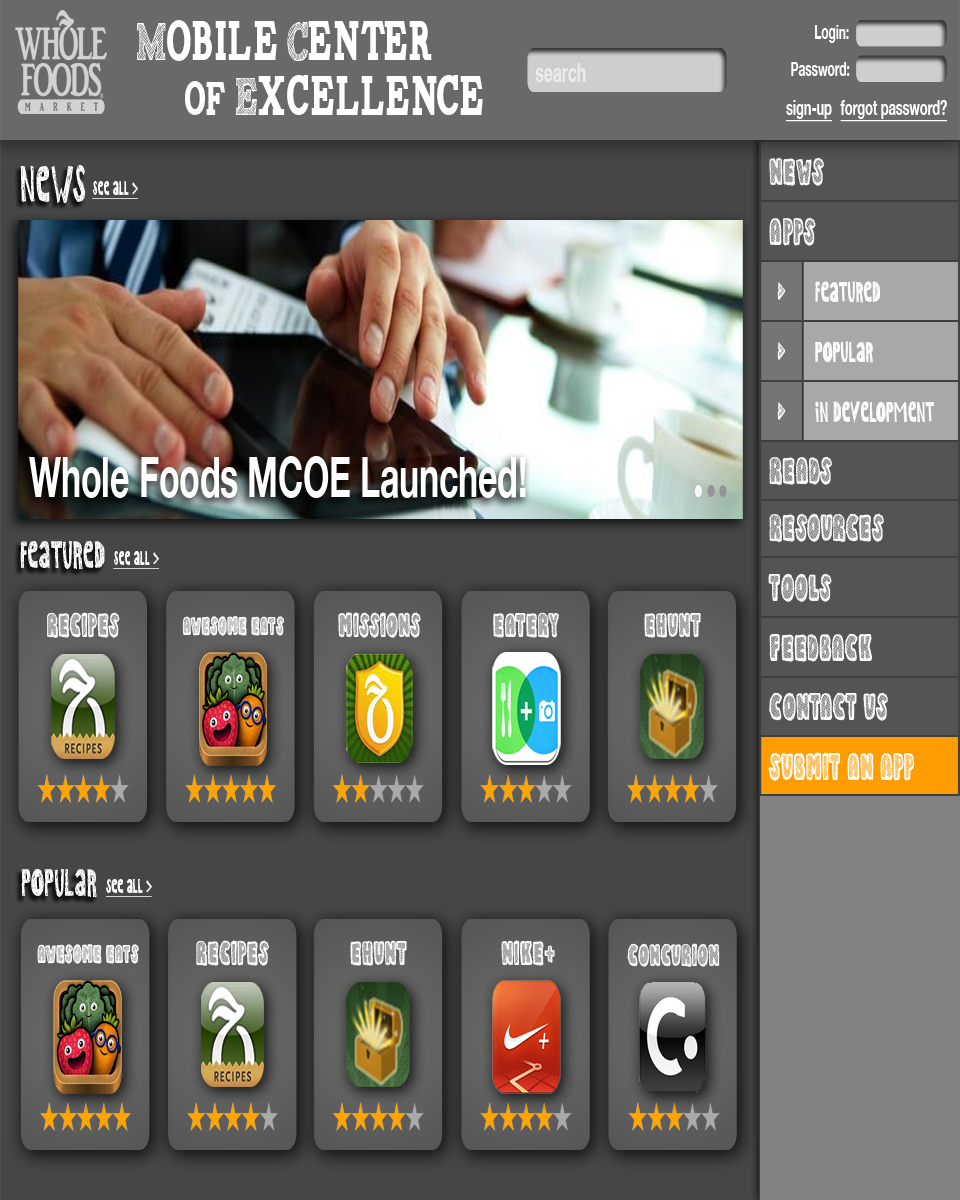
<style>
.page{position:relative;width:960px;height:1200px}
.page>*{position:absolute;margin:0}
.t1{font:56.1px "WFM-SketchCartonBold";color:#ffffff;scale:0.63 1}
.t2{font:19.8px "HelveticaNeue-Bold";color:#ffffff;scale:0.6 1}
.t3{font:26.3px "HelveticaNeue-Bold";color:#ececec;scale:0.6 1}
.t4{font:47.7px "WFM-SketchCartonBold";color:#ffffff;scale:0.63 1}
.t5{font:20.9px "HelveticaNeue-Bold";color:#ffffff;text-decoration:underline;scale:0.61 1}
.t6{font:40.5px "WholeStripey";color:#ffffff;scale:0.6 1}
.t7{font:54.7px "WholeMessy";color:#ffffff;scale:0.6 1}
.t8{font:21.2px "WholeMessy";color:#ffffff;text-decoration:underline;scale:0.6 1}
.t9{font:31.3px "WholeMessy";color:#ffffff;scale:0.6 1}
.t10{font:31.3px "WholeStripey";color:#ffffff;scale:0.6 1}
.t11{font:55.5px "HelveticaNeue-Bold";color:#ffffff;scale:0.6 1}
.t12{font:40.7px "WholeMessy";color:#ffffff;scale:0.6 1}
.t13{font:36.2px "WholeStripey";color:#ffffff;scale:0.6 1}
.t14{font:27.7px "WholeStripey";color:#ffffff;scale:0.59 1}
.t15{font:33px "WholeStripey";color:#ffffff;scale:0.6 1}
</style>
<div class="page">
<p class="t1" style="left:136px;top:20px;width:296px;height:41px">Mobile Center</p>
<p class="t2" style="left:815px;top:25px;width:34px;height:18px">Login:</p>
<p class="t3" style="left:535px;top:63px;width:51px;height:19px">search</p>
<p class="t2" style="left:791px;top:62px;width:59px;height:14px">Password:</p>
<p class="t1" style="left:185px;top:75px;width:298px;height:40px"><span class="t4">of</span> Excellence</p>
<p class="t5" style="left:786px;top:100px;width:46px;height:22px">sign-up</p>
<p class="t5" style="left:840px;top:100px;width:107px;height:22px">forgot password?</p>
<p class="t6" style="left:769px;top:157px;width:55px;height:29px">news</p>
<p class="t7" style="left:20px;top:165px;width:65px;height:38px">News</p>
<p class="t8" style="left:92px;top:180px;width:46px;height:19px">see all &gt;</p>
<p class="t6" style="left:769px;top:217px;width:47px;height:29px">Apps</p>
<p class="t9" style="left:815px;top:281px;width:65px;height:22px">featured</p>
<p class="t10" style="left:777px;top:282px;width:9px;height:18px">&gt;</p>
<p class="t10" style="left:777px;top:342px;width:9px;height:18px">&gt;</p>
<p class="t9" style="left:815px;top:341px;width:58px;height:22px">popular</p>
<p class="t9" style="left:815px;top:401px;width:119px;height:22px">in development</p>
<p class="t10" style="left:777px;top:402px;width:9px;height:18px">&gt;</p>
<p class="t11" style="left:29px;top:456px;width:497px;height:42px">Whole Foods MCOE Launched!</p>
<p class="t6" style="left:769px;top:456px;width:63px;height:30px">reads</p>
<p class="t6" style="left:769px;top:513px;width:115px;height:30px">resources</p>
<p class="t12" style="left:20px;top:541px;width:85px;height:29px">Featured</p>
<p class="t8" style="left:113px;top:550px;width:46px;height:19px">see all &gt;</p>
<p class="t6" style="left:768px;top:573px;width:64px;height:29px">tools</p>
<p class="t13" style="left:47px;top:612px;width:73px;height:26px">Recipes</p>
<p class="t14" style="left:182px;top:616px;width:103px;height:20px">Awesome Eats</p>
<p class="t13" style="left:338px;top:612px;width:83px;height:26px">Missions</p>
<p class="t13" style="left:493px;top:612px;width:66px;height:26px">Eatery</p>
<p class="t13" style="left:644px;top:612px;width:57px;height:26px">eHunt</p>
<p class="t6" style="left:769px;top:633px;width:104px;height:29px">feedback</p>
<p class="t6" style="left:769px;top:692px;width:119px;height:29px">Contact us</p>
<p class="t6" style="left:768px;top:752px;width:147px;height:29px">submit an app</p>
<p class="t12" style="left:21px;top:869px;width:76px;height:29px">Popular</p>
<p class="t8" style="left:106px;top:878px;width:46px;height:19px">see all &gt;</p>
<p class="t13" style="left:196px;top:940px;width:73px;height:26px">Recipes</p>
<p class="t13" style="left:350px;top:940px;width:57px;height:26px">eHunt</p>
<p class="t13" style="left:501px;top:940px;width:54px;height:26px">Nike+</p>
<p class="t14" style="left:37px;top:944px;width:102px;height:20px">Awesome Eats</p>
<p class="t15" style="left:627px;top:943px;width:93px;height:24px">Concurion</p>
</div>
